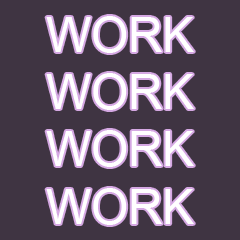
<style>
.page{position:relative;width:240px;height:240px;background:#3f3442}
.page>*{position:absolute;margin:0}
.t1{font:47.7px "ArialMT";color:#ffffff}
</style>
<div class="page">
<p class="t1" style="left:46px;top:16px;width:148px;height:209px">WORK<br>WORK<br>WORK<br>WORK</p>
</div>
